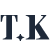
<style>
.page{position:relative;width:50px;height:50px;background:#ffffff}
.page>*{position:absolute;margin:0}
.t1{font:33.1px "Magtis-ExtraBold";color:#1e2939;font-weight:bold;scale:1.04 1}
</style>
<div class="page">
<p class="t1" style="left:0px;top:15px;width:50px;height:26px">T.K</p>
</div>
